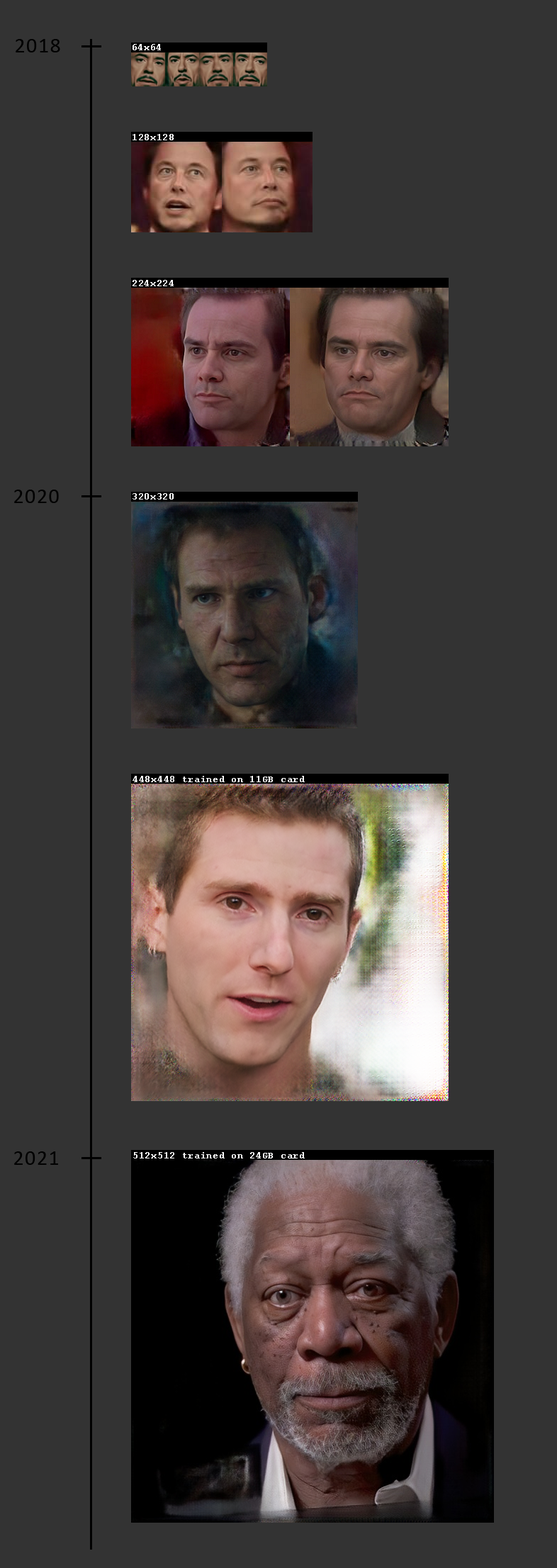
<style>
.page{position:relative;width:557px;height:1568px;background:#333333}
.page>*{position:absolute;margin:0}
.t1{font:21.3px "Calibri";letter-spacing:0.05em;color:#000000}
.t2{font:9.9px "CourierNewPS-BoldMT";letter-spacing:0.05em;color:#ffffff}
</style>
<div class="page">
<p class="t1" style="left:16px;top:39px;width:44px;height:13px">2018</p>
<p class="t2" style="left:132px;top:44px;width:29px;height:6px">64x64</p>
<p class="t2" style="left:132px;top:134px;width:42px;height:6px">128x128</p>
<p class="t2" style="left:132px;top:280px;width:42px;height:6px">224x224</p>
<p class="t1" style="left:14px;top:490px;width:45px;height:13px">2020</p>
<p class="t2" style="left:132px;top:493px;width:42px;height:7px">320x320</p>
<p class="t2" style="left:132px;top:776px;width:173px;height:6px">448x448 trained on 11GB card</p>
<p class="t1" style="left:14px;top:1151px;width:44px;height:14px">2021</p>
<p class="t2" style="left:133px;top:1152px;width:172px;height:6px">512x512 trained on 24GB card</p>
</div>
